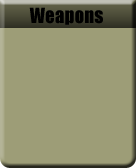
<style>
.page{position:relative;width:136px;height:168px;background:#9d9d77}
.page>*{position:absolute;margin:0}
.t1{font:19.2px "Impact";color:#000000}
</style>
<div class="page">
<p class="t1" style="left:29px;top:7px;width:74px;height:18px">Weapons</p>
</div>
